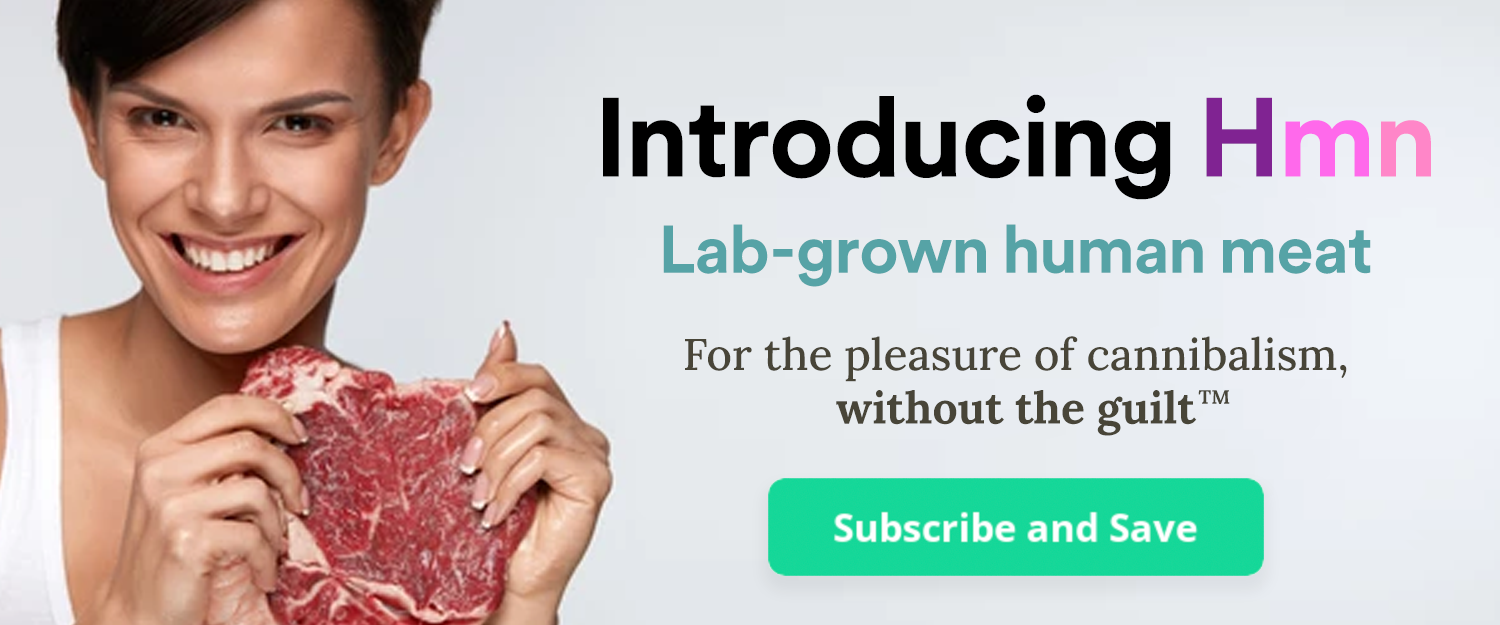
<style>
.page{position:relative;width:1500px;height:625px}
.page>*{position:absolute;margin:0}
.t1{font:111.1px "CircularSpotifyHead-Bold";color:#000000}
.t2{font:111.1px "CircularSpotifyHead-Bold";color:#802392}
.t3{font:111.1px "CircularSpotifyHead-Bold";color:#ff69eb}
.t4{font:111.1px "CircularSpotifyHead-Bold";color:#ff86c8}
.t5{font:66.7px "CircularSpotifyHead-Bold";color:#56a3a6}
.t6{font:44.4px "Lora-Medium";color:#484538}
.t7{font:44.4px "Lora-Bold";color:#484538}
.t8{font:19.4px "Lora-Bold";color:#484538}
</style>
<div class="page">
<p class="t1" style="left:603px;top:94px;width:828px;height:106px">Introducing <span class="t2">H</span><span class="t3">m</span><span class="t4">n</span></p>
<p class="t5" style="left:663px;top:224px;width:708px;height:63px">Lab-grown human meat</p>
<p class="t6" style="left:685px;top:336px;width:662px;height:100px;text-align:center">For the pleasure of cannibalism, <span class="t7">without the guilt</span></p>
<p class="t8" style="left:1198px;top:390px;width:32px;height:14px">TM</p>
</div>
